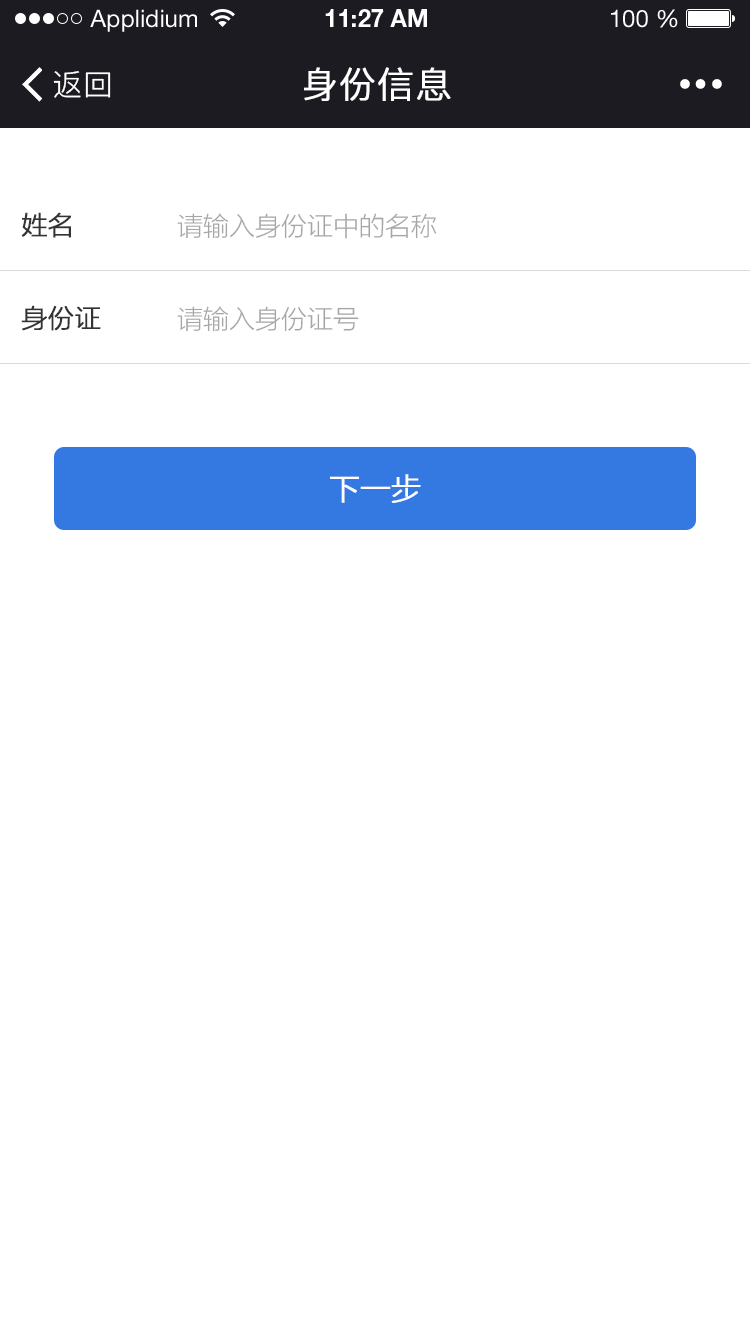
<style>
.page{position:relative;width:750px;height:1334px;background:#ffffff}
.page>*{position:absolute;margin:0}
.t1{font:24px "HelveticaNeueLTStd-Roman";color:#ffffff}
.t2{font:24px "HelveticaNeueLTStd-Bd";color:#ffffff}
.t3{font:30px "PingFang-SC-Regular";letter-spacing:0.025em;color:#ffffff}
.t4{font:36px "PingFang-SC-Regular";letter-spacing:0.025em;color:#ffffff;font-weight:bold}
.t5{font:26px "FZLTXHK--GBK1-0";color:#333333;font-weight:bold}
.t6{font:26px "FZLTXHK--GBK1-0";color:#a6a6a6}
.t7{font:30px "FZLTXHK--GBK1-0";color:#ffffff;font-weight:bold}
</style>
<div class="page">
<p class="t1" style="left:90px;top:9px;width:107px;height:23px">Applidium</p>
<p class="t2" style="left:325px;top:9px;width:102px;height:18px">11:27 AM</p>
<p class="t1" style="left:611px;top:9px;width:67px;height:19px">100 %</p>
<p class="t3" style="left:53px;top:71px;width:58px;height:27px">返回</p>
<p class="t4" style="left:304px;top:67px;width:147px;height:34px">身份信息</p>
<p class="t5" style="left:21px;top:212px;width:50px;height:26px">姓名</p>
<p class="t6" style="left:177px;top:213px;width:260px;height:26px">请输入身份证中的名称</p>
<p class="t5" style="left:21px;top:305px;width:80px;height:26px">身份证</p>
<p class="t6" style="left:177px;top:306px;width:182px;height:26px">请输入身份证号</p>
<p class="t7" style="left:330px;top:474px;width:91px;height:29px">下一步</p>
</div>
